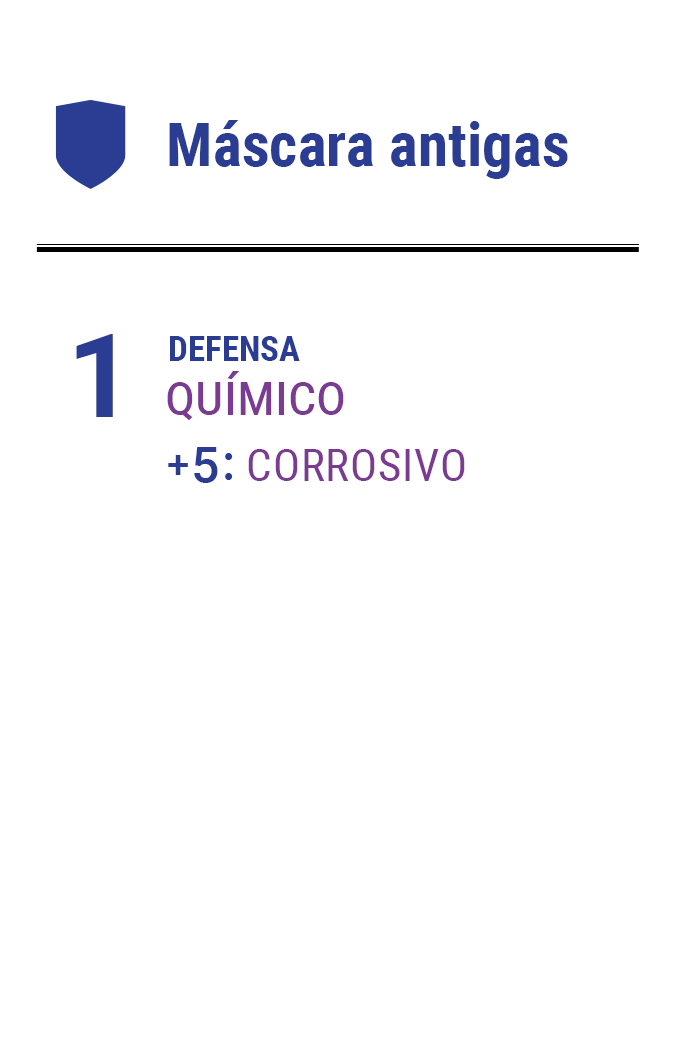
<style>
.page{position:relative;width:675px;height:1050px;background:#ffffff}
.page>*{position:absolute;margin:0}
.t1{font:61.2px "RobotoCondensed-Bold";color:#2a3d93}
.t2{font:116.7px "Roboto-Bold";letter-spacing:-0.16em;color:#2a3d93}
.t3{font:35px "RobotoCondensed-Bold";color:#2a3d93}
.t4{font:58.3px "RobotoCondensed-Regular";color:#7c3b92;font-variant:small-caps}
.t5{font:49.8px "Roboto-Medium";letter-spacing:-0.1em;color:#2a3d93}
.t6{font:39.7px "Roboto-Medium";letter-spacing:-0.1em;color:#2a3d93}
.t7{font:44.6px "RobotoCondensed-Regular";letter-spacing:0.02em;color:#7c3b92;text-transform:uppercase}
</style>
<div class="page">
<p class="t1" style="left:169px;top:120px;width:399px;height:59px">Máscara antigas</p>
<p class="t2" style="left:76px;top:334px;width:37px;height:83px">1</p>
<p class="t3" style="left:170px;top:336px;width:130px;height:25px">DEFENSA</p>
<p class="t4" style="left:167px;top:371px;width:177px;height:50px">químico</p>
<p class="t5" style="left:168px;top:447px;width:65px;height:36px"><span class="t6">+ </span>5 :</p>
<p class="t7" style="left:248px;top:449px;width:217px;height:32px">corrosivo</p>
</div>
